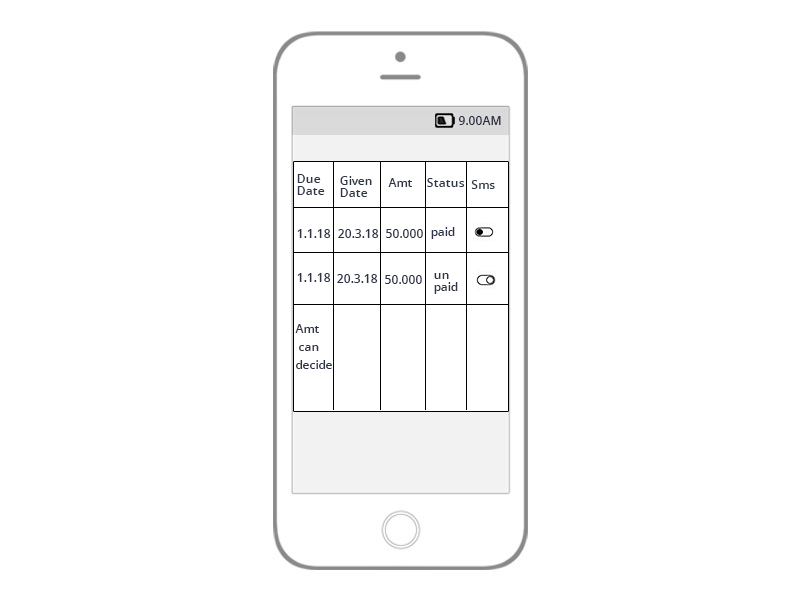
<style>
.page{position:relative;width:800px;height:600px;background:#ffffff}
.page>*{position:absolute;margin:0}
.t1{font:12px "OpenSans-Semibold";color:#2c3445}
.t2{font:12px/6px "OpenSans-Semibold";color:#2c3445}
</style>
<div class="page">
<p class="t1" style="left:458px;top:116px;width:43px;height:9px">9.00AM</p>
<p class="t2" style="left:297px;top:174px;width:28px;height:21px">Due<br><br>Date</p>
<p class="t2" style="left:340px;top:176px;width:32px;height:21px">Given<br><br>Date</p>
<p class="t1" style="left:388px;top:178px;width:24px;height:9px">Amt</p>
<p class="t1" style="left:427px;top:178px;width:38px;height:9px">Status</p>
<p class="t1" style="left:471px;top:180px;width:24px;height:9px">Sms</p>
<p class="t1" style="left:297px;top:229px;width:34px;height:9px">1.1.18</p>
<p class="t1" style="left:338px;top:229px;width:41px;height:9px">20.3.18</p>
<p class="t1" style="left:386px;top:229px;width:37px;height:9px">50.000</p>
<p class="t1" style="left:431px;top:227px;width:24px;height:12px">paid</p>
<p class="t1" style="left:297px;top:273px;width:34px;height:9px">1.1.18</p>
<p class="t1" style="left:337px;top:274px;width:41px;height:9px">20.3.18</p>
<p class="t1" style="left:385px;top:275px;width:37px;height:9px">50.000</p>
<p class="t2" style="left:434px;top:273px;width:24px;height:21px">un <br><br>paid</p>
<p class="t2" style="left:295px;top:324px;width:37px;height:45px">Amt <br><br><br> can <br><br><br>decide</p>
</div>
